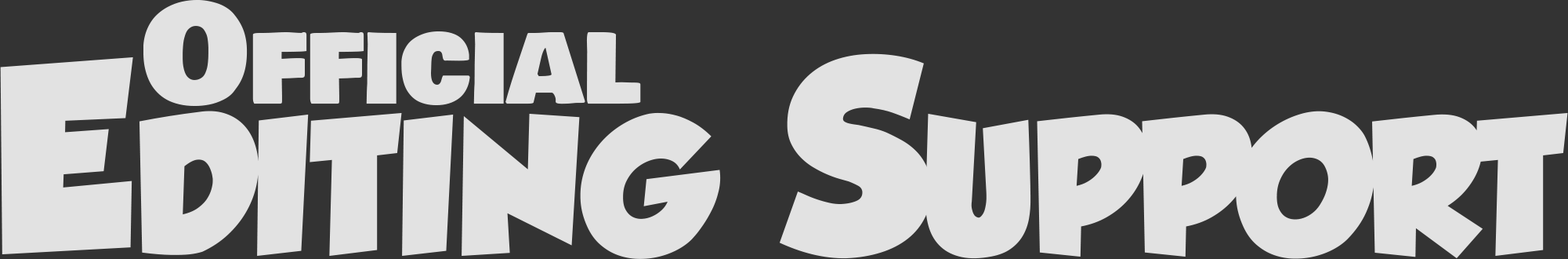
<style>
.page{position:relative;width:1568px;height:259px;background:#333333}
.page>*{position:absolute;margin:0}
.t1{font:134.9px "BowlbyOneSC-Regular";letter-spacing:-0.01em;color:#e2e2e2;font-variant:small-caps}
.t2{font:240px "GROBOLD";letter-spacing:-0.01em;color:#e2e2e2;font-variant:small-caps}
</style>
<div class="page">
<p class="t1" style="left:143px;top:0px;width:498px;height:106px">Official</p>
<p class="t2" style="left:0px;top:53px;width:1568px;height:206px">Editing Support</p>
</div>
